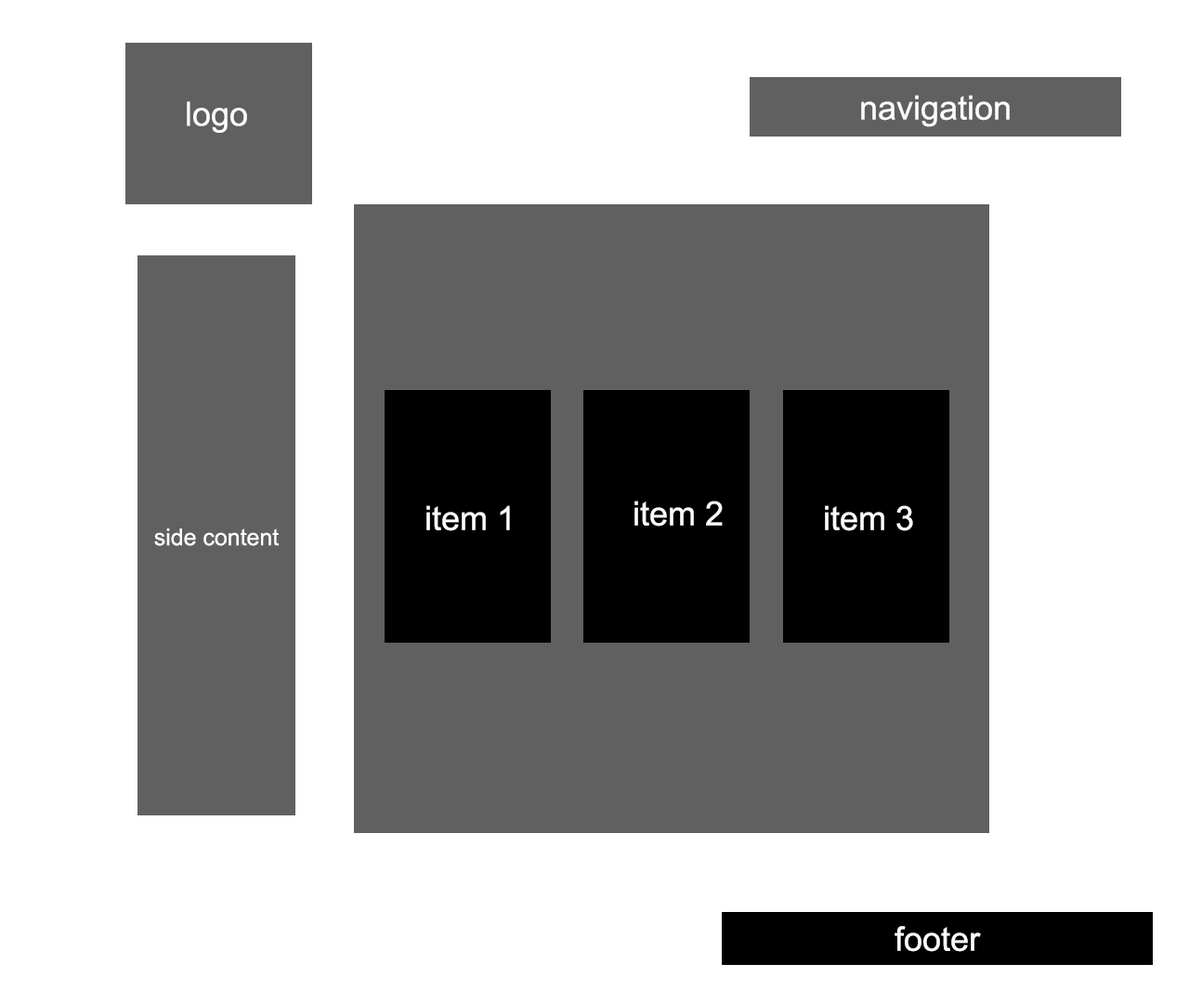
<style>
.page{position:relative;width:1189px;height:1003px;background:#ffffff}
.page>*{position:absolute;margin:0}
.t1{font:33.4px "ArialMT";color:#fcfcfc}
.t2{font:23.1px "ArialMT";color:#fcfcfc}
</style>
<div class="page">
<p class="t1" style="left:187px;top:101px;width:60px;height:32px">logo</p>
<p class="t1" style="left:861px;top:95px;width:149px;height:32px">navigation</p>
<p class="t1" style="left:426px;top:505px;width:84px;height:26px">item 1</p>
<p class="t1" style="left:634px;top:501px;width:89px;height:26px">item 2</p>
<p class="t1" style="left:825px;top:505px;width:88px;height:26px">item 3</p>
<p class="t2" style="left:154px;top:528px;width:126px;height:18px">side content</p>
<p class="t1" style="left:894px;top:926px;width:87px;height:26px">footer</p>
</div>
